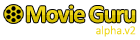
<style>
.page{position:relative;width:140px;height:40px;background:#ffffff}
.page>*{position:absolute;margin:0}
.t1{font:25px "Calibri-Bold";letter-spacing:-0.05em}
.t2{font:12px "Calibri-Light";color:#eed719}
</style>
<div class="page">
<p class="t1" style="left:26px;top:5px;width:110px;height:18px">Movie Guru</p>
<p class="t2" style="left:96px;top:25px;width:40px;height:12px">alpha.v2</p>
</div>
